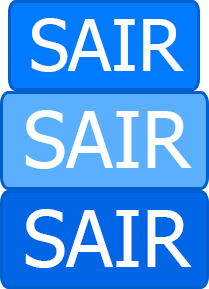
<style>
.page{position:relative;width:209px;height:289px;background:#5ab0ff}
.page>*{position:absolute;margin:0}
.t1{font:72px "Tahoma";color:#ffffff}
.t2{font:78.3px "Tahoma";color:#ffffff}
</style>
<div class="page">
<p class="t1" style="left:31px;top:18px;width:153px;height:54px">SAIR</p>
<p class="t2" style="left:25px;top:110px;width:167px;height:59px">SAIR</p>
<p class="t2" style="left:25px;top:209px;width:167px;height:59px">SAIR</p>
</div>
